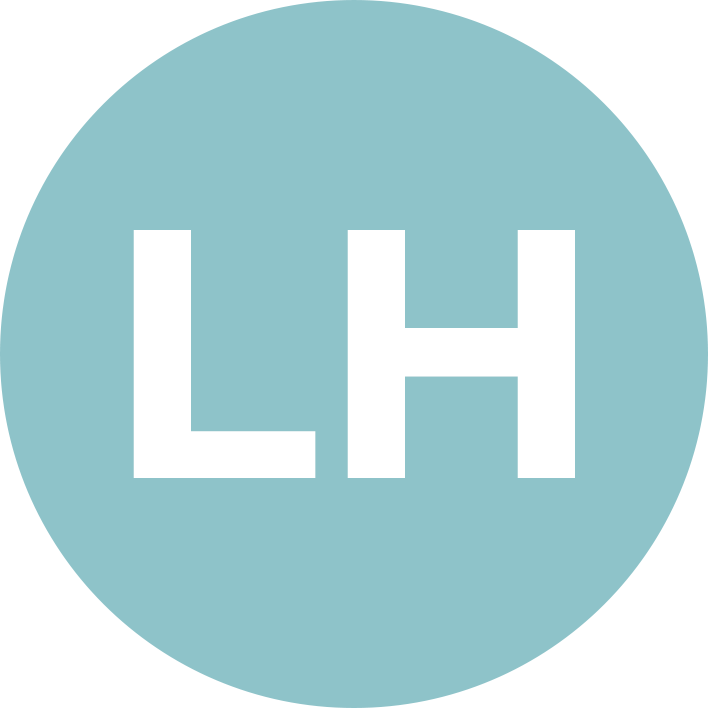
<style>
.page{position:relative;width:708px;height:708px;background:#8ec3c9}
.page>*{position:absolute;margin:0}
.t1{font:354.2px "Montserrat-Bold";color:#ffffff}
</style>
<div class="page">
<p class="t1" style="left:133px;top:230px;width:442px;height:248px">LH</p>
</div>
